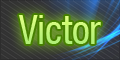
<style>
.page{position:relative;width:120px;height:60px}
.page>*{position:absolute;margin:0}
.t1{font:40px "HelveticaNeueLT-Condensed";letter-spacing:-0.01em;color:#c6f67c}
</style>
<div class="page">
<p class="t1" style="left:18px;top:15px;width:83px;height:29px">Victor</p>
</div>
